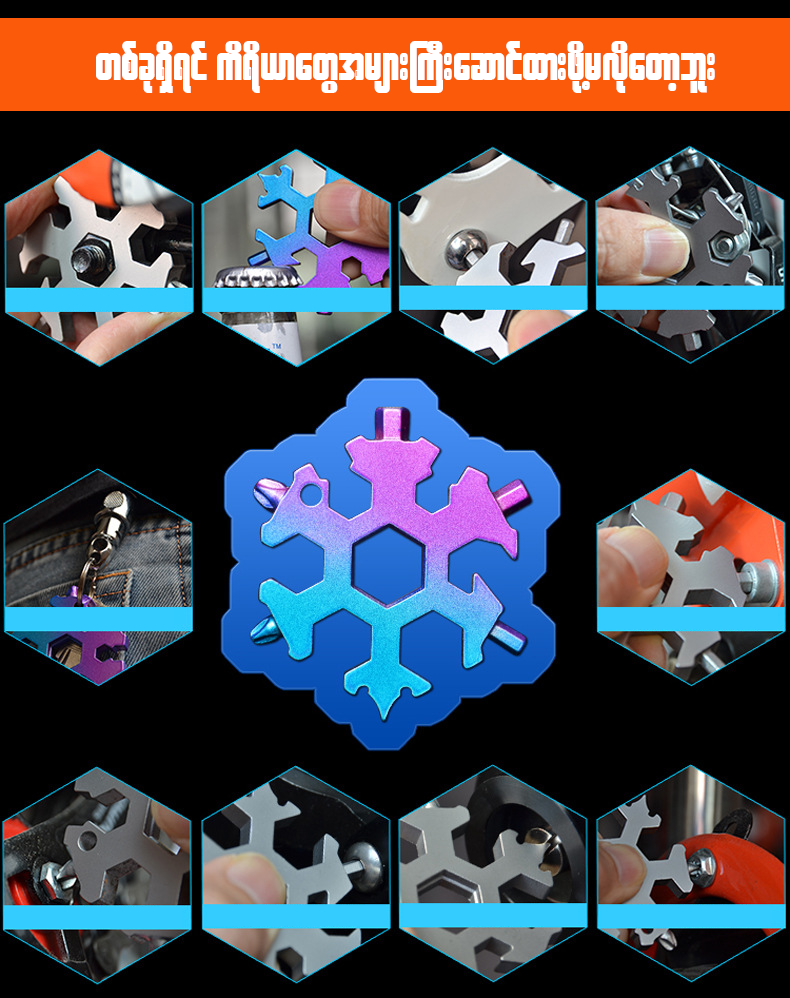
<style>
.page{position:relative;width:790px;height:998px;background:#000000}
.page>*{position:absolute;margin:0}
.t1{font:52.3px "W30ArtHouse";color:#ffffff}
</style>
<div class="page">
<p class="t1" style="left:96px;top:41px;width:619px;height:52px">wpfck&amp;Sd&amp;if ud&amp;d,mawGtrsm;BuD;aqmifxm;zdkYrvdkawmhbl;</p>
</div>
